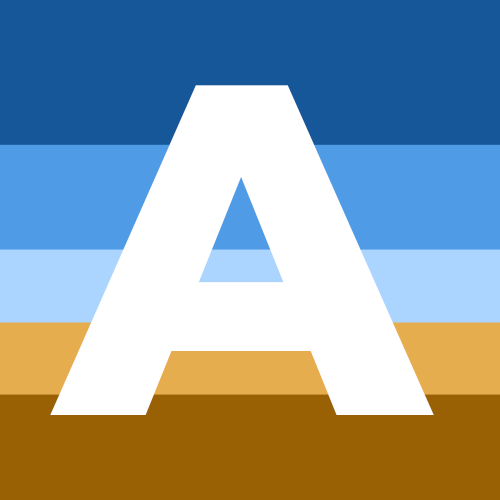
<style>
.page{position:relative;width:500px;height:500px;background:#155799}
.page>*{position:absolute;margin:0}
.t1{font:470.8px "Montserrat-ExtraBold";color:#ffffff}
</style>
<div class="page">
<p class="t1" style="left:50px;top:85px;width:384px;height:330px">A</p>
</div>
